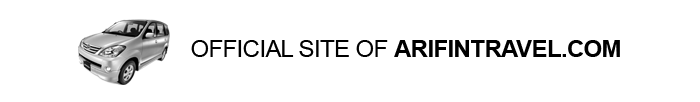
<style>
.page{position:relative;width:700px;height:102px;background:#ffffff}
.page>*{position:absolute;margin:0}
.t1{font:24px "ArialMT";letter-spacing:-0.025em;color:#000000}
.t2{font:24px "Arial-BoldMT";letter-spacing:-0.025em;color:#000000}
</style>
<div class="page">
<p class="t1" style="left:191px;top:40px;width:429px;height:17px">OFFICIAL SITE OF <span class="t2">ARIFINTRAVEL.COM</span></p>
</div>
